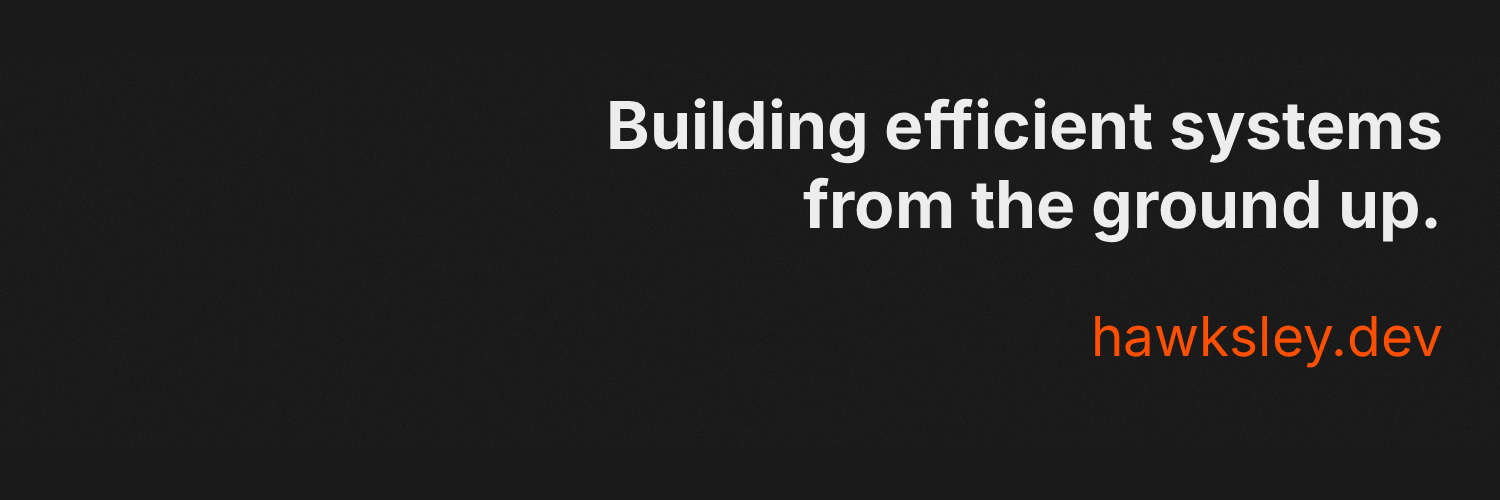
<style>
.page{position:relative;width:1500px;height:500px;background:#1a1a1a}
.page>*{position:absolute;margin:0}
.t1{font:66px "Inter-Bold";color:#ededed}
.t2{font:55px "Inter-Regular";color:#ff4f00}
</style>
<div class="page">
<p class="t1" style="left:610px;top:98px;width:832px;height:270px;text-align:right">Building efficient systems<br>from the ground up.<br><br><span class="t2">hawksley.dev</span></p>
</div>
